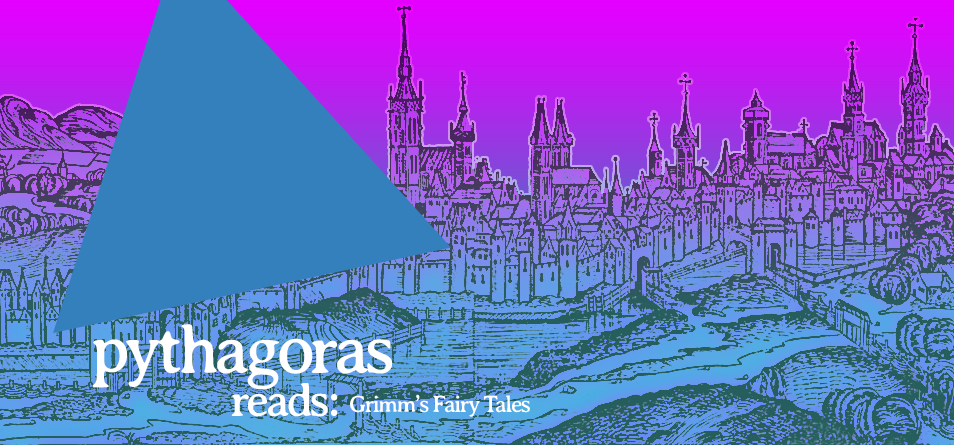
<style>
.page{position:relative;width:954px;height:445px}
.page>*{position:absolute;margin:0}
.t1{font:72px "AveriaSerif-Regular";letter-spacing:-0.075em;color:#ffffff}
.t2{font:48px "AveriaSerif-Regular";letter-spacing:-0.075em;color:#ffffff}
.t3{font:24px "AveriaSerif-Regular";letter-spacing:-0.075em;color:#ffffff}
</style>
<div class="page">
<p class="t1" style="left:92px;top:324px;width:301px;height:66px">pythagoras</p>
<p class="t2" style="left:231px;top:383px;width:107px;height:34px">reads:</p>
<p class="t3" style="left:350px;top:395px;width:180px;height:22px">Grimm’s Fairy Tales</p>
</div>
